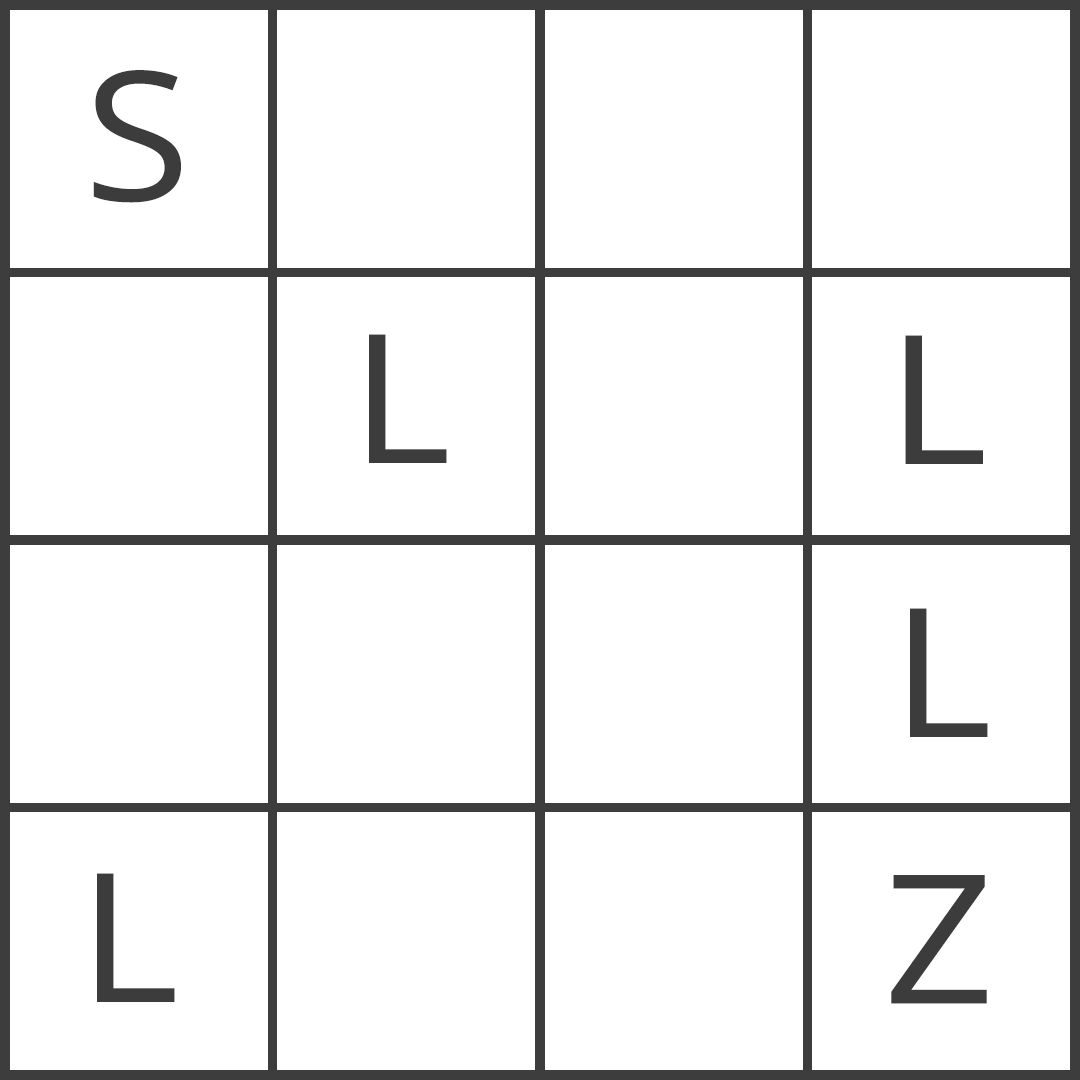
<style>
.page{position:relative;width:1080px;height:1080px;background:#ffffff}
.page>*{position:absolute;margin:0}
.t1{font:180px "OpenSans-Regular";letter-spacing:0.06em;color:#3c3c3c;scale:1.08 1}
</style>
<div class="page">
<p class="t1" style="left:93px;top:70px;width:88px;height:133px">S</p>
<p class="t1" style="left:369px;top:334px;width:78px;height:129px">L</p>
<p class="t1" style="left:905px;top:335px;width:78px;height:129px">L</p>
<p class="t1" style="left:910px;top:608px;width:78px;height:129px">L</p>
<p class="t1" style="left:97px;top:873px;width:78px;height:129px">L</p>
<p class="t1" style="left:891px;top:875px;width:96px;height:129px">Z</p>
</div>
